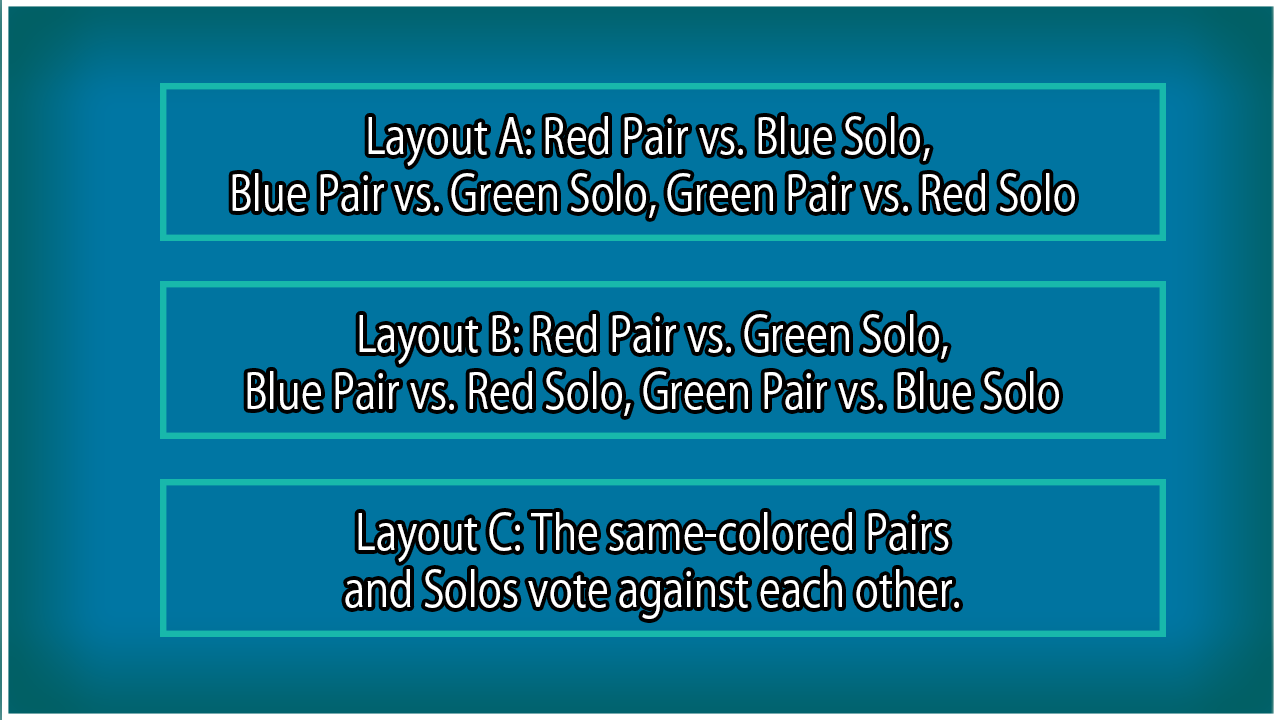
<style>
.page{position:relative;width:1280px;height:720px;background:#0074a0}
.page>*{position:absolute;margin:0}
.t1{font:48px "KozGoPr6N-Regular";color:#ffffff;scale:0.84 1}
</style>
<div class="page">
<p class="t1" style="left:232px;top:116px;width:843px;height:102px;text-align:center">Layout A: Red Pair vs. Blue Solo, <br>Blue Pair vs. Green Solo, Green Pair vs. Red Solo</p>
<p class="t1" style="left:247px;top:314px;width:812px;height:102px;text-align:center">Layout B: Red Pair vs. Green Solo,<br>Blue Pair vs. Red Solo, Green Pair vs. Blue Solo</p>
<p class="t1" style="left:345px;top:512px;width:614px;height:107px;text-align:center">Layout C: The same-colored Pairs<br>and Solos vote against each other.</p>
</div>
